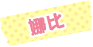
<style>
.page{position:relative;width:93px;height:47px;background:#ffffff}
.page>*{position:absolute;margin:0}
.t1{font:11.5px "shetumodengxiaofangti";color:#ef8299;font-weight:bold;scale:0.94 1}
</style>
<div class="page">
<p class="t1" style="left:28px;top:13px;width:37px;height:23px;rotate:-14deg">娜比</p>
</div>
